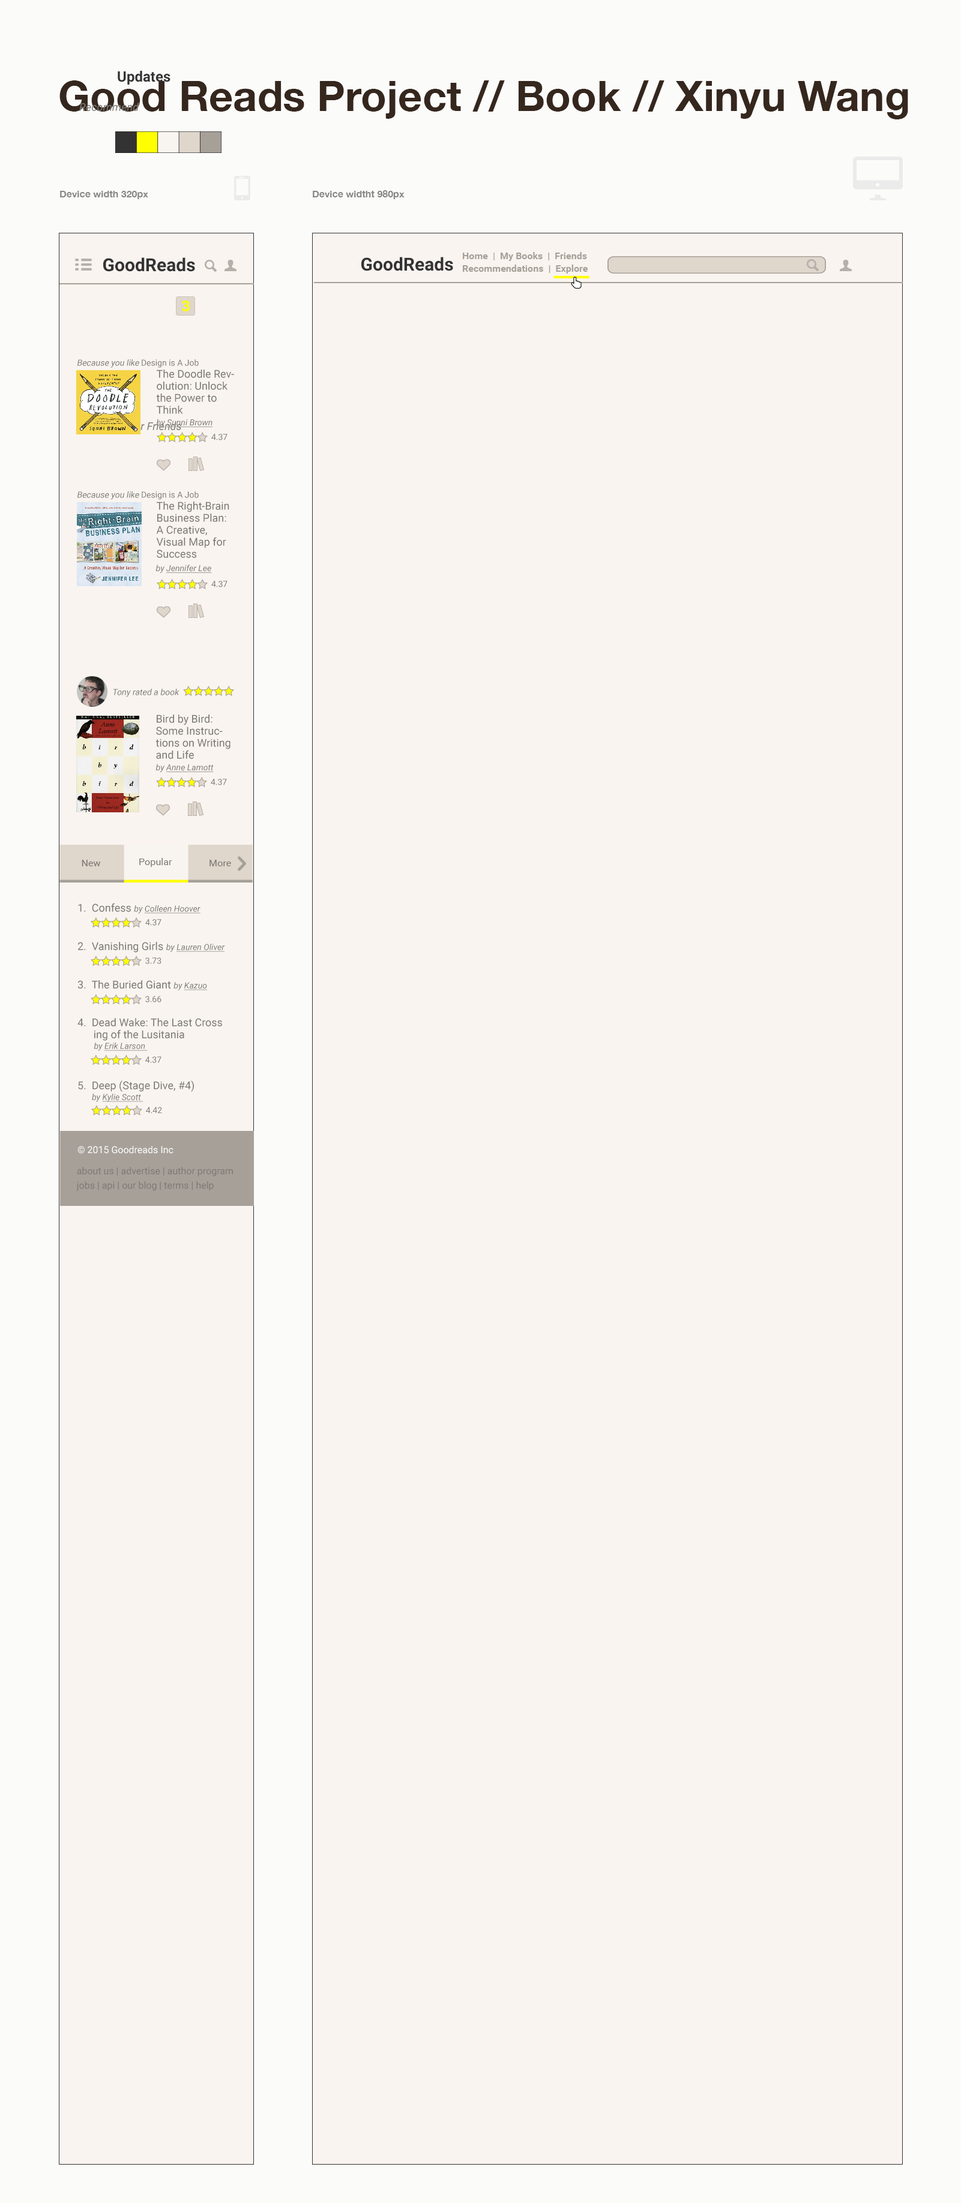
<style>
.page{position:relative;width:961px;height:2203px;background:#f9f4f0}
.page>*{position:absolute;margin:0}
.t1{font:14.4px "Roboto-Bold";color:#333333}
.t2{font:42px "HelveticaNeue-Bold";color:#35271e}
.t3{font:9.6px "HelveticaNeue-Bold";color:#878787}
.t4{font:18px "Roboto-Bold";color:#333333}
.t5{font:8.4px "Roboto-Regular";color:#7d7973;font-style:italic}
.t6{font:8.4px "Roboto-Regular";color:#7d7973}
.t7{font:10.8px/12px "Roboto-Regular";color:#7d7973}
.t8{font:8.4px "Roboto-Italic";color:#7d7973;text-decoration:underline}
.t9{font:8.4px "Roboto-Italic";color:#7d7973}
.t10{font:10.8px "Roboto-Regular";color:#7d7973}
.t11{font:8.4px/10.8px "Roboto-Italic";color:#7d7973}
.t12{font:8.4px/10.8px "Roboto-Italic";color:#7d7973;text-decoration:underline}
.t13{font:9.6px "Roboto-Regular";color:#fcfcfb}
.t14{font:9.6px/14.4px "Roboto-Regular";color:#7d7973}
</style>
<div class="page">
<p class="t1" style="left:118px;top:71px;width:52px;height:14px">Updates</p>
<p class="t2" style="left:59px;top:80px;width:849px;height:39px">Good Reads Project // Book // Xinyu Wang</p>
<p class="t3" style="left:60px;top:191px;width:88px;height:8px">Device width 320px</p>
<p class="t3" style="left:313px;top:190px;width:91px;height:9px">Device widtht 980px</p>
<p class="t4" style="left:103px;top:257px;width:92px;height:15px">GoodReads</p>
<p class="t4" style="left:361px;top:257px;width:92px;height:14px">GoodReads</p>
<p class="t5" style="left:77px;top:359px;width:122px;height:9px">Because you like<span class="t6"> Design is A Job</span></p>
<p class="t7" style="left:156px;top:370px;width:78px;height:44px">The Doodle Revolution: Unlock the Power to Think <br>Differently</p>
<p class="t8" style="left:156px;top:419px;width:57px;height:8px"><span class="t9">by </span>Sunni Brown</p>
<p class="t6" style="left:211px;top:434px;width:16px;height:6px">4.37</p>
<p class="t5" style="left:77px;top:491px;width:122px;height:9px">Because you like<span class="t6"> Design is A Job</span></p>
<p class="t7" style="left:156px;top:502px;width:73px;height:56px">The Right-Brain <br>Business Plan: <br>A Creative, <br>Visual Map for <br>Success</p>
<p class="t8" style="left:155px;top:565px;width:57px;height:8px"><span class="t9">by </span>Jennifer Lee</p>
<p class="t6" style="left:211px;top:581px;width:16px;height:6px">4.37</p>
<p class="t5" style="left:113px;top:689px;width:66px;height:8px">Tony rated a book</p>
<p class="t7" style="left:155px;top:715px;width:75px;height:44px">Bird by Bird: Some Instructions on Writing and Life <br>Differently</p>
<p class="t8" style="left:155px;top:764px;width:59px;height:8px"><span class="t9">by </span>Anne Lamott</p>
<p class="t6" style="left:211px;top:779px;width:16px;height:6px">4.37</p>
<p class="t8" style="left:78px;top:903px;width:122px;height:11px"><span class="t10">1.  Confess </span><span class="t9">by </span>Colleen Hoover</p>
<p class="t6" style="left:145px;top:919px;width:16px;height:7px">4.37</p>
<p class="t10" style="left:77px;top:942px;width:148px;height:11px">2.  Vanishing Girls <span class="t9">by </span><span class="t8">Lauren Oliver</span></p>
<p class="t6" style="left:145px;top:958px;width:16px;height:6px">3.73</p>
<p class="t10" style="left:77px;top:980px;width:131px;height:11px">3.  The Buried Giant <span class="t9">by </span><span class="t8">Kazuo</span></p>
<p class="t6" style="left:145px;top:996px;width:16px;height:7px">3.66</p>
<p class="t7" style="left:77px;top:1018px;width:145px;height:33px">4.  Dead Wake: The Last Cross   <br>      ing of the Lusitania <br><span class="t11">        by </span><span class="t12">Erik Larson</span></p>
<p class="t6" style="left:145px;top:1057px;width:16px;height:6px">4.37</p>
<p class="t7" style="left:78px;top:1081px;width:116px;height:21px">5.  Deep (Stage Dive, #4)  <br><span class="t11">       by </span><span class="t12">Kylie Scott</span></p>
<p class="t6" style="left:146px;top:1107px;width:16px;height:7px">4.42</p>
<p class="t13" style="left:77px;top:1146px;width:96px;height:8px">© 2015 Goodreads Inc</p>
<p class="t14" style="left:76px;top:1167px;width:157px;height:24px">about us | advertise | author program <br>jobs | api | our blog | terms | help</p>
</div>
